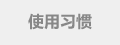
<style>
.page{position:relative;width:120px;height:45px;background:#efefef}
.page>*{position:absolute;margin:0}
.t1{font:16px "MicrosoftYaHei";color:#878787}
</style>
<div class="page">
<p class="t1" style="left:28px;top:13px;width:64px;height:17px">使用习惯</p>
</div>
